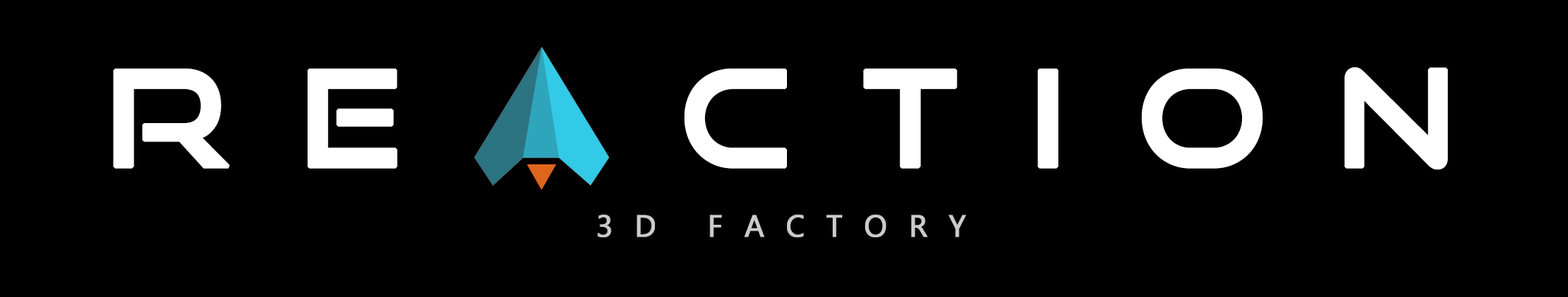
<style>
.page{position:relative;width:1568px;height:297px;background:#000000}
.page>*{position:absolute;margin:0}
.t1{font:132.3px "GoodTimesRg-Regular";letter-spacing:0.1em;color:#ffffff;font-weight:bold}
.t2{font:30.9px "Ebrima";letter-spacing:0.2em;color:#cbcbcb;font-weight:bold}
</style>
<div class="page">
<p class="t1" style="left:113px;top:69px;width:285px;height:100px">R E</p>
<p class="t1" style="left:684px;top:67px;width:764px;height:103px">C T I O N</p>
<p class="t2" style="left:597px;top:215px;width:369px;height:22px">3 D   F A C T O R Y</p>
</div>
